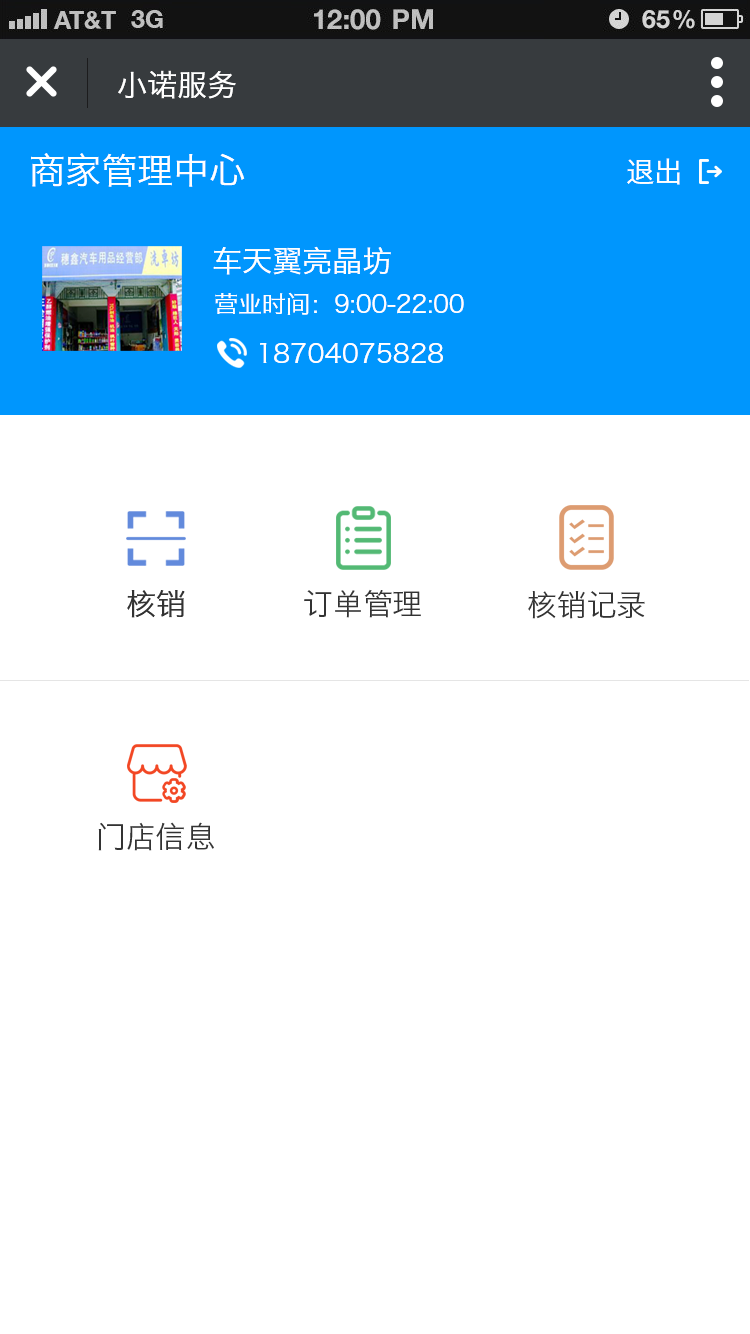
<style>
.page{position:relative;width:750px;height:1334px;background:#ffffff}
.page>*{position:absolute;margin:0}
.t1{font:30px "HiraginoSansGB-W3";color:#ffffff}
.t2{font:36px "HiraginoSansGB-W3";color:#ffffff}
.t3{font:28px "HiraginoSansGB-W3";color:#ffffff}
.t4{font:24px "HiraginoSansGB-W3";color:#ffffff}
.t5{font:26px "HiraginoSansGB-W3";color:#ffffff}
.t6{font:30px "HiraginoSansGB-W3";color:#333333}
.t7{font:30.1px "HiraginoSansGB-W3";color:#333333}
</style>
<div class="page">
<p class="t1" style="left:118px;top:70px;width:118px;height:29px">小诺服务</p>
<p class="t2" style="left:31px;top:153px;width:214px;height:34px">商家管理中心</p>
<p class="t3" style="left:627px;top:158px;width:53px;height:27px">退出</p>
<p class="t1" style="left:213px;top:246px;width:178px;height:29px">车天翼亮晶坊</p>
<p class="t4" style="left:215px;top:292px;width:249px;height:23px">营业时间：9:00-22:00</p>
<p class="t5" style="left:260px;top:343px;width:183px;height:20px">18704075828</p>
<p class="t6" style="left:127px;top:590px;width:58px;height:28px">核销</p>
<p class="t6" style="left:304px;top:589px;width:117px;height:29px">订单管理</p>
<p class="t7" style="left:528px;top:591px;width:117px;height:28px">核销记录</p>
<p class="t6" style="left:98px;top:822px;width:116px;height:29px">门店信息</p>
</div>
